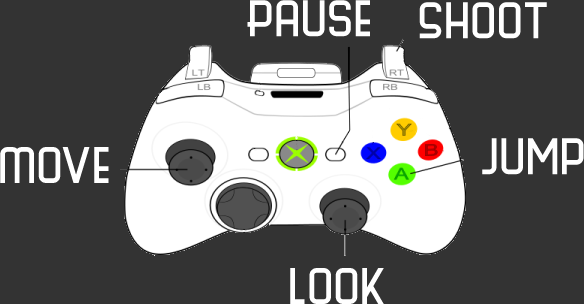
<style>
.page{position:relative;width:584px;height:304px;background:#333333}
.page>*{position:absolute;margin:0}
.t1{font:48px "ScienceFair";color:#ffffff}
</style>
<div class="page">
<p class="t1" style="left:247px;top:0px;width:123px;height:37px">Pause</p>
<p class="t1" style="left:419px;top:2px;width:128px;height:37px">Shoot</p>
<p class="t1" style="left:0px;top:147px;width:109px;height:36px">Move</p>
<p class="t1" style="left:482px;top:138px;width:102px;height:37px">Jump</p>
<p class="t1" style="left:290px;top:268px;width:94px;height:36px">Look</p>
</div>
